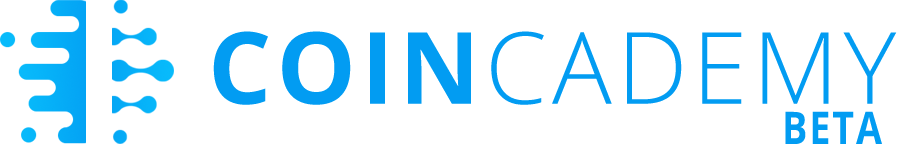
<style>
.page{position:relative;width:900px;height:144px;background:#ffffff}
.page>*{position:absolute;margin:0}
.t1{font:99.8px "OpenSans-Light";letter-spacing:0.05em;color:#029cf2}
.t2{font:99.8px "OpenSans-Bold";letter-spacing:0.05em;color:#029cf2}
.t3{font:45px "OpenSans-Bold";letter-spacing:0.05em;color:#029cf2;scale:0.84 1}
</style>
<div class="page">
<p class="t1" style="left:213px;top:31px;width:684px;height:74px"><span class="t2">COIN</span>CADEMY</p>
<p class="t3" style="left:785px;top:111px;width:97px;height:33px">BETA</p>
</div>
